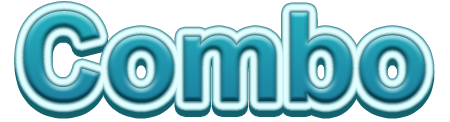
<style>
.page{position:relative;width:450px;height:122px;background:#ffffff}
.page>*{position:absolute;margin:0}
.t1{font:123.2px "Arial-BoldMT";scale:0.97 1}
</style>
<div class="page">
<p class="t1" style="left:24px;top:17px;width:401px;height:92px">Combo</p>
<p class="t1" style="left:24px;top:11px;width:401px;height:92px">Combo</p>
</div>
